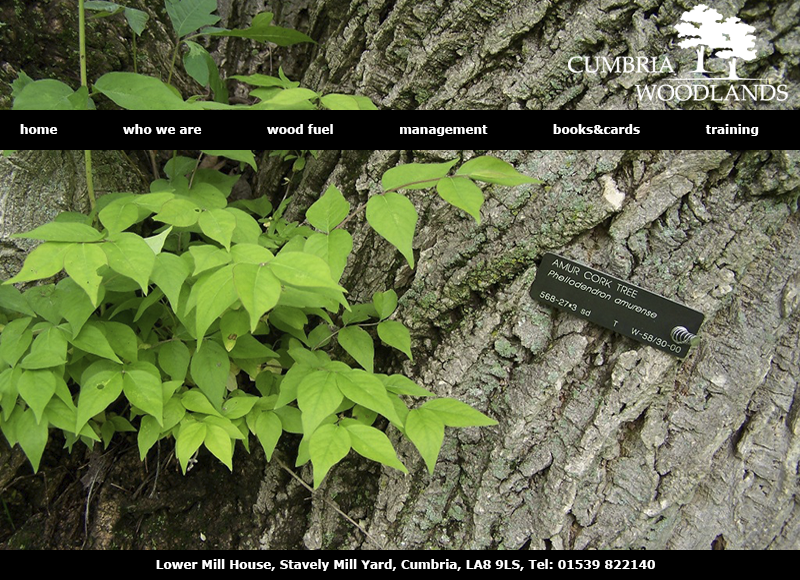
<style>
.page{position:relative;width:800px;height:580px}
.page>*{position:absolute;margin:0}
.t1{font:12px "Verdana-Bold";color:#ffffff}
</style>
<div class="page">
<p class="t1" style="left:20px;top:124px;width:739px;height:12px">home                who we are                wood fuel                management                books&amp;cards                training</p>
<p class="t1" style="left:156px;top:559px;width:499px;height:12px">Lower Mill House, Stavely Mill Yard, Cumbria, LA8 9LS, Tel: 01539 822140</p>
</div>
